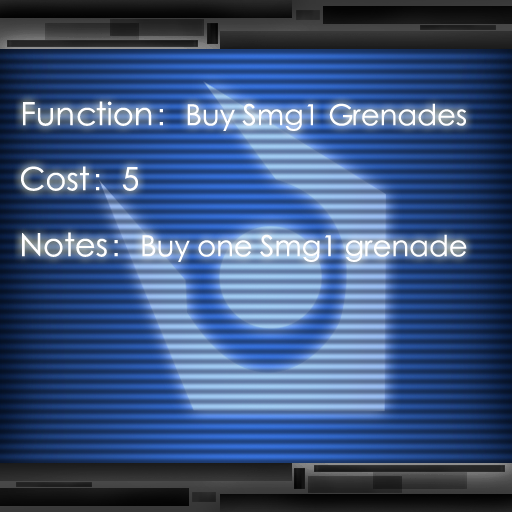
<style>
.page{position:relative;width:512px;height:512px}
.page>*{position:absolute;margin:0}
.t1{font:29px "STXihei";color:#ffffff}
.t2{font:32px "STXihei";color:#ffffff}
</style>
<div class="page">
<p class="t1" style="left:23px;top:101px;width:443px;height:30px"><span class="t2">Function：</span>Buy Smg1 Grenades</p>
<p class="t2" style="left:21px;top:166px;width:117px;height:25px">Cost：5</p>
<p class="t1" style="left:22px;top:232px;width:445px;height:30px"><span class="t2">Notes：</span>Buy one Smg1 grenade</p>
</div>
